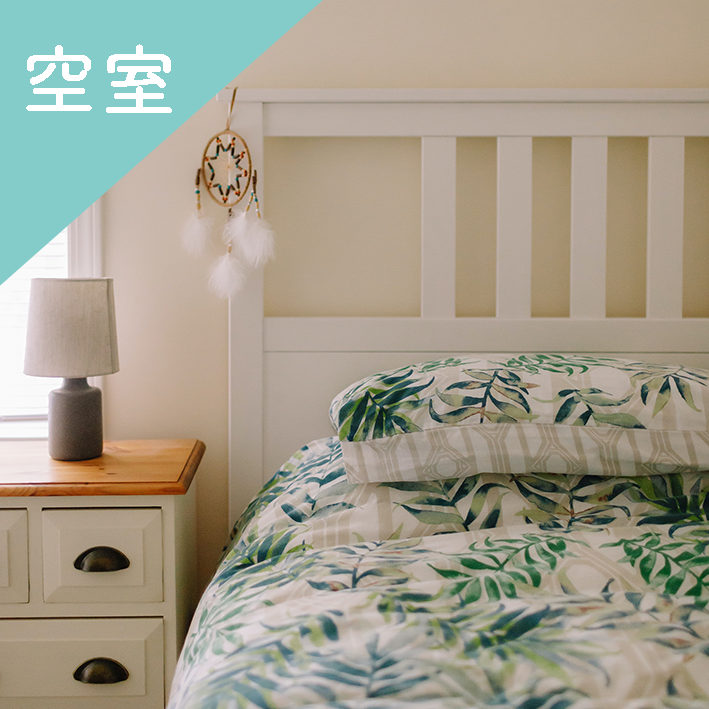
<style>
.page{position:relative;width:709px;height:709px}
.page>*{position:absolute;margin:0}
.t1{font:80px "TsukuARdGothicStd-B";letter-spacing:0.01em;color:#ffffff}
</style>
<div class="page">
<p class="t1" style="left:26px;top:44px;width:146px;height:69px">空室</p>
</div>
